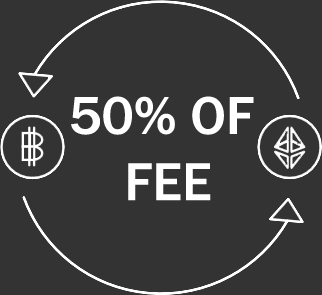
<style>
.page{position:relative;width:322px;height:295px;background:#333333}
.page>*{position:absolute;margin:0}
.t1{font:55.1px "FranklinGothic-Medium";color:#ffffff}
</style>
<div class="page">
<p class="t1" style="left:71px;top:96px;width:183px;height:105px">50% OF<br>    FEE</p>
</div>
